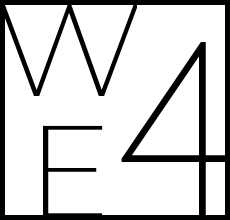
<style>
.page{position:relative;width:230px;height:220px;background:#ffffff}
.page>*{position:absolute;margin:0}
.t1{font:124.6px "Navigo-Thin";color:#000000;scale:1.15 1}
.t2{font:228px "Navigo-Thin";color:#000000;scale:0.86 1}
</style>
<div class="page">
<p class="t1" style="left:1px;top:5px;width:136px;height:213px;text-align:right">WE</p>
<p class="t2" style="left:121px;top:42px;width:105px;height:173px">4</p>
</div>
